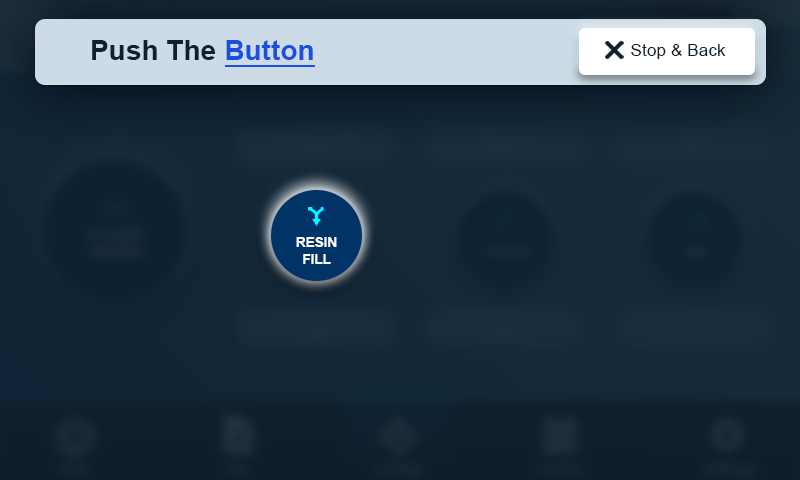
<style>
.page{position:relative;width:800px;height:480px}
.page>*{position:absolute;margin:0}
.t1{font:27.8px "Arial-BoldMT";letter-spacing:0.01em;color:#0f202f}
.t2{font:27.8px "Arial-BoldMT";letter-spacing:0.01em;color:#1b51da}
.t3{font:17.1px "ArialMT";letter-spacing:0.01em;color:#0f202f}
.t4{font:13.5px "Arial-BoldMT";color:#ffffff}
</style>
<div class="page">
<p class="t1" style="left:92px;top:40px;width:221px;height:20px">Push The <span class="t2">Button</span></p>
<p class="t3" style="left:631px;top:44px;width:95px;height:15px">Stop &amp; Back</p>
<p class="t4" style="left:296px;top:237px;width:41px;height:27px;text-align:center">RESIN<br>FILL</p>
</div>
